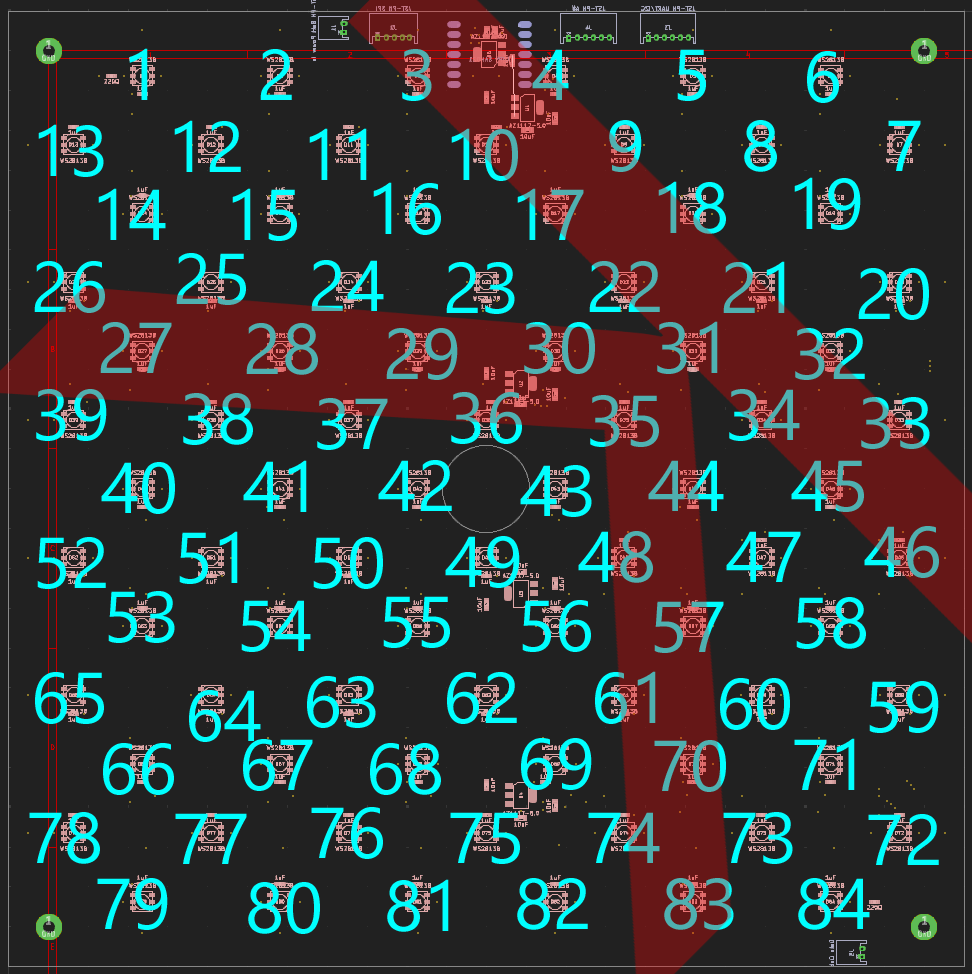
<style>
.page{position:relative;width:972px;height:974px;background:#212121}
.page>*{position:absolute;margin:0}
.t1{font:71.7px "Ebrima";color:#00ffff}
.t2{font:71.7px "Ebrima";color:#4fb0b0}
.t3{font:71.7px "Ebrima"}
</style>
<div class="page">
<p class="t1" style="left:129px;top:48px;width:19px;height:52px">1</p>
<p class="t1" style="left:260px;top:49px;width:32px;height:51px">2</p>
<p class="t2" style="left:402px;top:49px;width:30px;height:52px">3</p>
<p class="t3" style="left:532px;top:49px;width:37px;height:51px">4</p>
<p class="t1" style="left:677px;top:49px;width:29px;height:52px">5</p>
<p class="t1" style="left:807px;top:51px;width:32px;height:52px">6</p>
<p class="t1" style="left:38px;top:124px;width:66px;height:53px">13</p>
<p class="t1" style="left:174px;top:120px;width:67px;height:52px">12</p>
<p class="t3" style="left:609px;top:120px;width:33px;height:52px">9</p>
<p class="t1" style="left:744px;top:120px;width:33px;height:52px">8</p>
<p class="t1" style="left:888px;top:120px;width:33px;height:51px">7</p>
<p class="t1" style="left:309px;top:128px;width:58px;height:52px">11</p>
<p class="t3" style="left:451px;top:128px;width:67px;height:53px">10</p>
<p class="t1" style="left:373px;top:182px;width:68px;height:53px">16</p>
<p class="t1" style="left:658px;top:181px;width:68px;height:53px">18</p>
<p class="t1" style="left:794px;top:177px;width:67px;height:53px">19</p>
<p class="t1" style="left:98px;top:188px;width:68px;height:52px">14</p>
<p class="t1" style="left:232px;top:188px;width:65px;height:53px">15</p>
<p class="t3" style="left:517px;top:188px;width:67px;height:52px">17</p>
<p class="t1" style="left:176px;top:253px;width:70px;height:52px">25</p>
<p class="t1" style="left:34px;top:261px;width:71px;height:52px">26</p>
<p class="t1" style="left:311px;top:260px;width:73px;height:51px">24</p>
<p class="t1" style="left:446px;top:262px;width:69px;height:52px">23</p>
<p class="t3" style="left:589px;top:261px;width:71px;height:51px">22</p>
<p class="t3" style="left:723px;top:261px;width:62px;height:52px">21</p>
<p class="t1" style="left:858px;top:268px;width:71px;height:52px">20</p>
<p class="t2" style="left:100px;top:322px;width:72px;height:51px">27</p>
<p class="t2" style="left:246px;top:323px;width:72px;height:52px">28</p>
<p class="t2" style="left:386px;top:328px;width:72px;height:52px">29</p>
<p class="t2" style="left:524px;top:322px;width:71px;height:52px">30</p>
<p class="t2" style="left:657px;top:321px;width:61px;height:53px">31</p>
<p class="t3" style="left:795px;top:328px;width:70px;height:52px">32</p>
<p class="t1" style="left:36px;top:389px;width:71px;height:52px">39</p>
<p class="t2" style="left:729px;top:389px;width:71px;height:52px">34</p>
<p class="t1" style="left:183px;top:393px;width:70px;height:52px">38</p>
<p class="t3" style="left:317px;top:398px;width:71px;height:52px">37</p>
<p class="t3" style="left:451px;top:392px;width:71px;height:52px">36</p>
<p class="t2" style="left:590px;top:395px;width:69px;height:52px">35</p>
<p class="t3" style="left:861px;top:397px;width:69px;height:52px">33</p>
<p class="t1" style="left:101px;top:462px;width:74px;height:52px">40</p>
<p class="t1" style="left:243px;top:460px;width:64px;height:52px">41</p>
<p class="t1" style="left:378px;top:460px;width:74px;height:51px">42</p>
<p class="t3" style="left:648px;top:460px;width:76px;height:51px">44</p>
<p class="t3" style="left:791px;top:460px;width:73px;height:52px">45</p>
<p class="t1" style="left:520px;top:465px;width:72px;height:52px">43</p>
<p class="t1" style="left:179px;top:531px;width:59px;height:53px">51</p>
<p class="t3" style="left:578px;top:531px;width:75px;height:52px">48</p>
<p class="t1" style="left:726px;top:531px;width:75px;height:51px">47</p>
<p class="t2" style="left:864px;top:526px;width:75px;height:52px">46</p>
<p class="t1" style="left:37px;top:537px;width:69px;height:52px">52</p>
<p class="t1" style="left:313px;top:537px;width:70px;height:52px">50</p>
<p class="t1" style="left:445px;top:536px;width:75px;height:52px">49</p>
<p class="t1" style="left:108px;top:591px;width:67px;height:52px">53</p>
<p class="t1" style="left:241px;top:600px;width:70px;height:52px">54</p>
<p class="t1" style="left:383px;top:596px;width:67px;height:52px">55</p>
<p class="t1" style="left:522px;top:600px;width:69px;height:52px">56</p>
<p class="t2" style="left:654px;top:601px;width:70px;height:52px">57</p>
<p class="t1" style="left:796px;top:597px;width:70px;height:52px">58</p>
<p class="t1" style="left:35px;top:672px;width:69px;height:52px">65</p>
<p class="t1" style="left:307px;top:676px;width:69px;height:52px">63</p>
<p class="t1" style="left:447px;top:672px;width:70px;height:52px">62</p>
<p class="t3" style="left:595px;top:671px;width:61px;height:53px">61</p>
<p class="t1" style="left:720px;top:678px;width:70px;height:52px">60</p>
<p class="t1" style="left:869px;top:681px;width:70px;height:52px">59</p>
<p class="t1" style="left:189px;top:690px;width:72px;height:52px">64</p>
<p class="t1" style="left:103px;top:743px;width:71px;height:52px">66</p>
<p class="t1" style="left:243px;top:739px;width:70px;height:52px">67</p>
<p class="t1" style="left:370px;top:743px;width:71px;height:52px">68</p>
<p class="t1" style="left:521px;top:738px;width:71px;height:52px">69</p>
<p class="t2" style="left:654px;top:740px;width:72px;height:52px">70</p>
<p class="t1" style="left:794px;top:738px;width:61px;height:52px">71</p>
<p class="t1" style="left:311px;top:807px;width:72px;height:52px">76</p>
<p class="t1" style="left:29px;top:812px;width:71px;height:52px">78</p>
<p class="t1" style="left:175px;top:813px;width:72px;height:51px">77</p>
<p class="t1" style="left:450px;top:812px;width:70px;height:52px">75</p>
<p class="t3" style="left:588px;top:812px;width:72px;height:51px">74</p>
<p class="t1" style="left:723px;top:812px;width:70px;height:52px">73</p>
<p class="t1" style="left:868px;top:814px;width:71px;height:51px">72</p>
<p class="t1" style="left:97px;top:878px;width:71px;height:52px">79</p>
<p class="t1" style="left:387px;top:879px;width:62px;height:53px">81</p>
<p class="t1" style="left:517px;top:878px;width:71px;height:52px">82</p>
<p class="t2" style="left:664px;top:878px;width:70px;height:52px">83</p>
<p class="t1" style="left:798px;top:878px;width:72px;height:52px">84</p>
<p class="t1" style="left:248px;top:882px;width:72px;height:52px">80</p>
</div>
